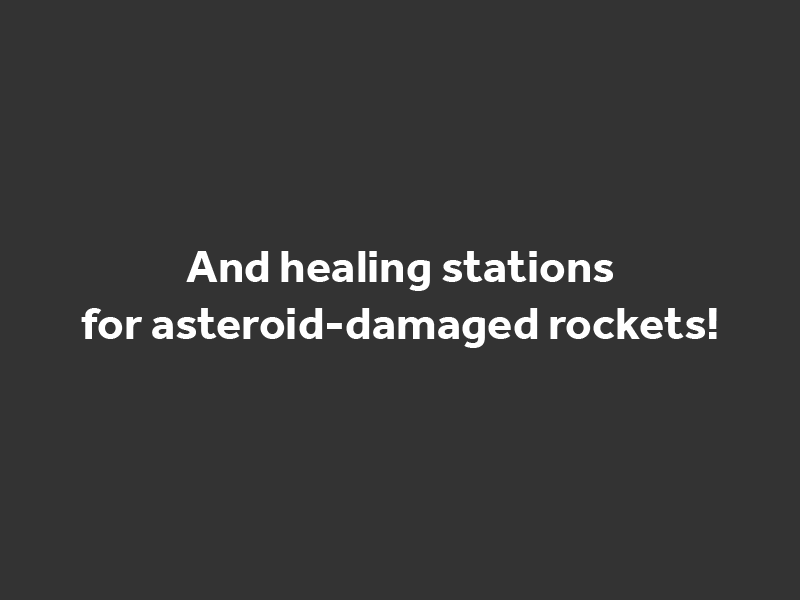
<style>
.page{position:relative;width:800px;height:600px;background:#333333}
.page>*{position:absolute;margin:0}
.t1{font:47.1px "Effra-Bold";color:#ffffff}
</style>
<div class="page">
<p class="t1" style="left:81px;top:251px;width:636px;height:97px;text-align:center">And healing stations<br>for asteroid-damaged rockets!</p>
</div>
